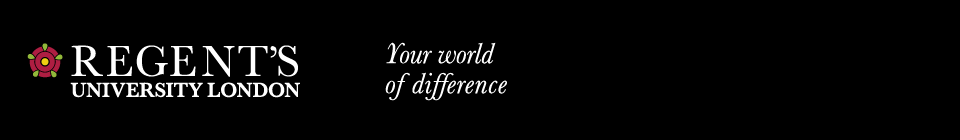
<style>
.page{position:relative;width:960px;height:140px;background:#000000}
.page>*{position:absolute;margin:0}
.t1{font:21px/21px "Baskerville-SemiBold";letter-spacing:-0.02em;color:#ffffff}
.t2{font:45px/21px "Baskerville";letter-spacing:0.035em;color:#ffffff}
.t3{font:30px/30px "Baskerville-Italic";letter-spacing:-0.009em;color:#ffffff}
.t4{font:30px/30px "Baskerville-Italic";letter-spacing:0.02em;color:#ffffff}
.t5{font:30px/30px "Baskerville-Italic";letter-spacing:-0.03em;color:#ffffff}
.t6{font:30px/30px "Baskerville-Italic";letter-spacing:0.01em;color:#ffffff}
</style>
<div class="page">
<p class="t1" style="left:70px;top:45px;width:230px;height:53px"><span class="t2">REGENT’S<br></span>UNIVERSITY LONDON</p>
<p class="t3" style="left:385px;top:42px;width:122px;height:59px">Your world    <span class="t4">of di</span><span class="t5">f</span><span class="t6">fe</span><span class="t4">rence</span></p>
</div>
